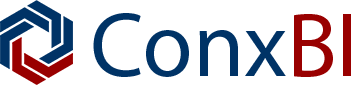
<style>
.page{position:relative;width:351px;height:85px;background:#ffffff}
.page>*{position:absolute;margin:0}
.t1{font:92px "MyriadPro-Regular";color:#003366}
.t2{font:92px "MyriadPro-Regular";color:#990000}
</style>
<div class="page">
<p class="t1" style="left:93px;top:13px;width:258px;height:64px">Conx<span class="t2">BI</span></p>
</div>
